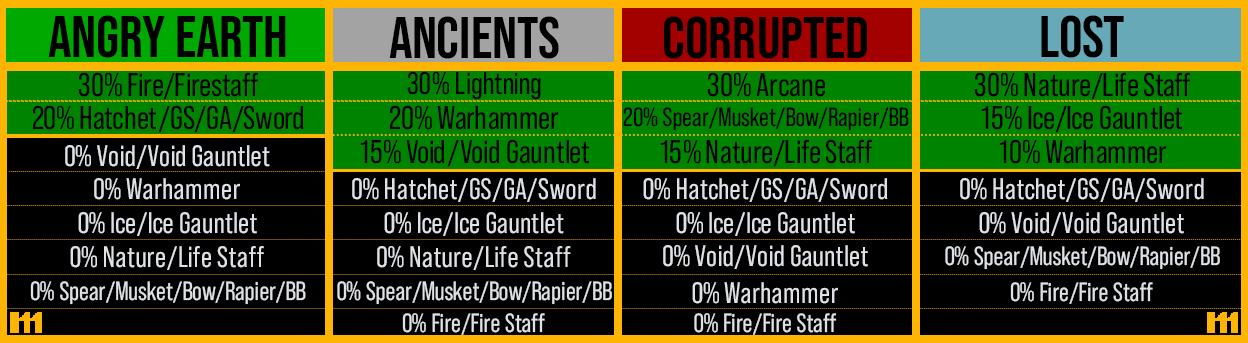
<style>
.page{position:relative;width:1248px;height:343px;background:#000000}
.page>*{position:absolute;margin:0}
.t1{font:59px "BebasNeue-Regular";color:#000000}
.t2{font:32.8px "BebasNeuePro-Regular";color:#000000}
.t3{font:31.2px "BebasNeuePro-Regular";color:#000000}
.t4{font:26.2px "BebasNeuePro-Regular";color:#000000}
.t5{font:29.5px "BebasNeuePro-Regular";color:#dee2e6}
.t6{font:26.2px "BebasNeuePro-Regular";color:#dee2e6}
</style>
<div class="page">
<p class="t1" style="left:48px;top:15px;width:238px;height:43px">Angry Earth</p>
<p class="t1" style="left:389px;top:16px;width:170px;height:43px">Ancients</p>
<p class="t1" style="left:664px;top:16px;width:203px;height:43px">Corrupted</p>
<p class="t1" style="left:1041px;top:15px;width:83px;height:43px">Lost</p>
<p class="t2" style="left:78px;top:72px;width:180px;height:28px">30% Fire/Firestaff</p>
<p class="t3" style="left:407px;top:71px;width:134px;height:29px">30% Lightning</p>
<p class="t2" style="left:707px;top:72px;width:118px;height:25px">30% Arcane</p>
<p class="t2" style="left:974px;top:72px;width:216px;height:28px">30% Nature/Life Staff</p>
<p class="t2" style="left:33px;top:105px;width:271px;height:28px">20% Hatchet/GS/GA/Sword</p>
<p class="t2" style="left:390px;top:105px;width:169px;height:25px">20% Warhammer</p>
<p class="t4" style="left:623px;top:107px;width:286px;height:24px">20% Spear/Musket/Bow/Rapier/BB</p>
<p class="t2" style="left:981px;top:105px;width:201px;height:28px">15% Ice/Ice Gauntlet</p>
<p class="t5" style="left:65px;top:145px;width:205px;height:24px">0% Void/Void Gauntlet</p>
<p class="t2" style="left:360px;top:139px;width:229px;height:28px">15% Void/Void Gauntlet</p>
<p class="t2" style="left:660px;top:139px;width:212px;height:28px">15% Nature/Life Staff</p>
<p class="t2" style="left:999px;top:139px;width:168px;height:25px">10% Warhammer</p>
<p class="t5" style="left:94px;top:178px;width:146px;height:22px">0% Warhammer</p>
<p class="t5" style="left:352px;top:178px;width:244px;height:24px">0% Hatchet/GS/GA/Sword</p>
<p class="t5" style="left:643px;top:178px;width:245px;height:24px">0% Hatchet/GS/GA/Sword</p>
<p class="t5" style="left:960px;top:178px;width:244px;height:24px">0% Hatchet/GS/GA/Sword</p>
<p class="t5" style="left:78px;top:212px;width:179px;height:24px">0% Ice/Ice Gauntlet</p>
<p class="t5" style="left:384px;top:212px;width:180px;height:24px">0% Ice/Ice Gauntlet</p>
<p class="t5" style="left:676px;top:212px;width:179px;height:24px">0% Ice/Ice Gauntlet</p>
<p class="t5" style="left:979px;top:212px;width:205px;height:24px">0% Void/Void Gauntlet</p>
<p class="t5" style="left:70px;top:246px;width:194px;height:24px">0% Nature/Life Staff</p>
<p class="t5" style="left:377px;top:246px;width:194px;height:24px">0% Nature/Life Staff</p>
<p class="t5" style="left:663px;top:245px;width:205px;height:24px">0% Void/Void Gauntlet</p>
<p class="t6" style="left:945px;top:246px;width:275px;height:24px">0% Spear/Musket/Bow/Rapier/BB</p>
<p class="t6" style="left:30px;top:281px;width:276px;height:24px">0% Spear/Musket/Bow/Rapier/BB</p>
<p class="t6" style="left:337px;top:281px;width:275px;height:24px">0% Spear/Musket/Bow/Rapier/BB</p>
<p class="t5" style="left:692px;top:282px;width:146px;height:22px">0% Warhammer</p>
<p class="t6" style="left:1010px;top:282px;width:143px;height:22px">0% Fire/Fire Staff</p>
<p class="t6" style="left:402px;top:313px;width:143px;height:22px">0% Fire/Fire Staff</p>
<p class="t6" style="left:694px;top:313px;width:143px;height:22px">0% Fire/Fire Staff</p>
</div>
